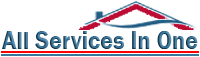
<style>
.page{position:relative;width:200px;height:57px;background:#ffffff}
.page>*{position:absolute;margin:0}
.t1{font:19.4px "FranklinGothic-Demi";scale:0.93 1}
</style>
<div class="page">
<p class="t1" style="left:2px;top:30px;width:196px;height:20px">All Services In One</p>
</div>
